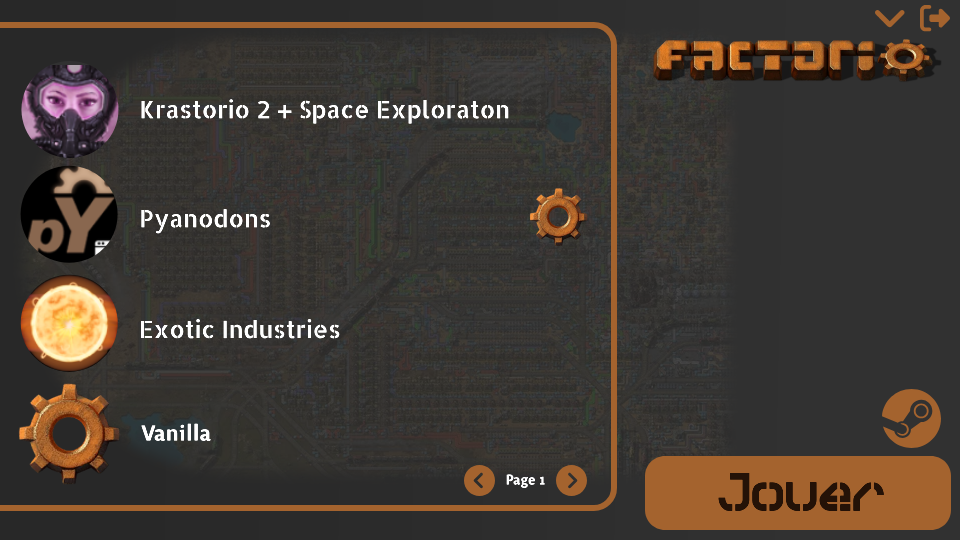
<style>
.page{position:relative;width:960px;height:540px}
.page>*{position:absolute;margin:0}
.t1{font:23.9px "AllertaStencil-Regular";color:#ffffff}
.t2{font:27.9px "Surface-Medium";color:#ffffff}
.t3{font:54px "Sylar-Stencil";color:#241207}
.t4{font:18px "Surface-Medium";color:#ffffff}
</style>
<div class="page">
<p class="t1" style="left:141px;top:99px;width:368px;height:25px">Krastorio 2 + Space Exploraton</p>
<p class="t1" style="left:141px;top:209px;width:129px;height:25px">Pyanodons</p>
<p class="t1" style="left:141px;top:319px;width:199px;height:20px">Exotic Industries</p>
<p class="t2" style="left:141px;top:423px;width:70px;height:18px">Vanilla</p>
<p class="t3" style="left:718px;top:473px;width:166px;height:38px">Jouer</p>
<p class="t4" style="left:506px;top:474px;width:39px;height:14px">Page 1</p>
</div>
